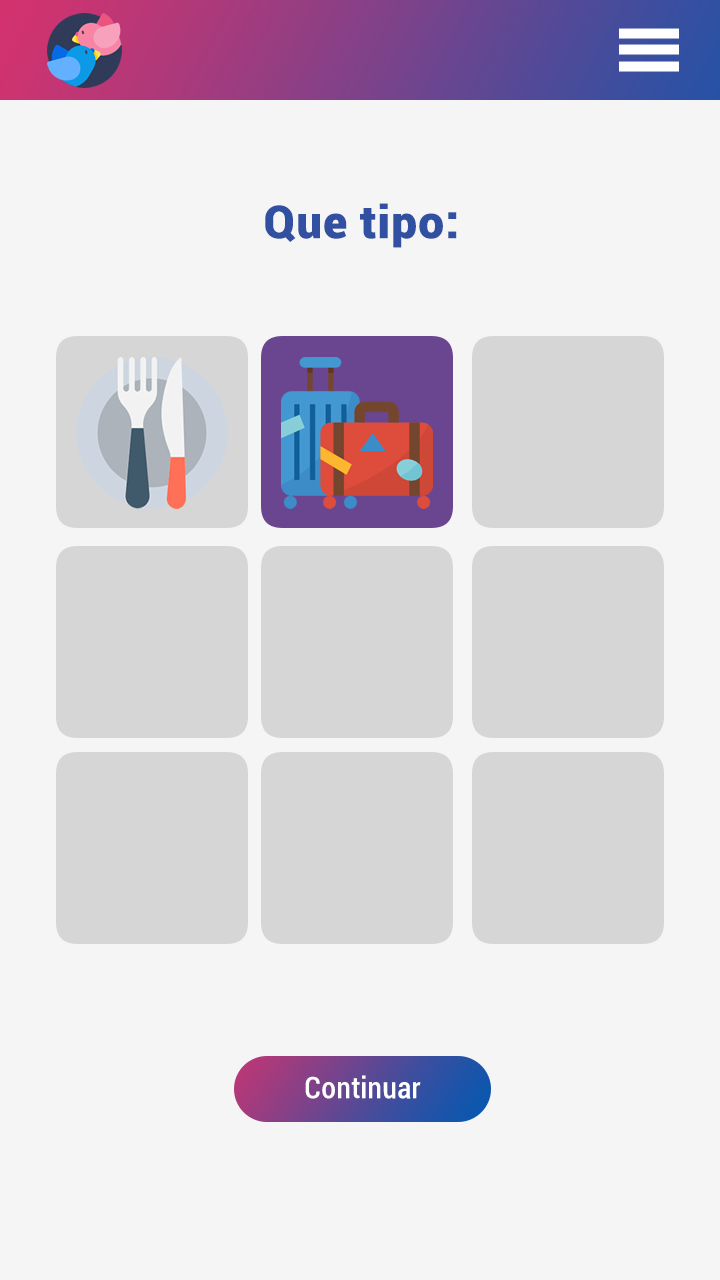
<style>
.page{position:relative;width:720px;height:1280px;background:#f5f5f5}
.page>*{position:absolute;margin:0}
.t1{font:45px "Roboto-Black";color:#3150a1;font-weight:bold}
.t2{font:29px "Roboto-Condensed";color:#ffffff;font-weight:bold}
</style>
<div class="page">
<p class="t1" style="left:265px;top:203px;width:192px;height:45px">Que tipo:</p>
<p class="t2" style="left:305px;top:1075px;width:116px;height:24px">Continuar</p>
</div>
